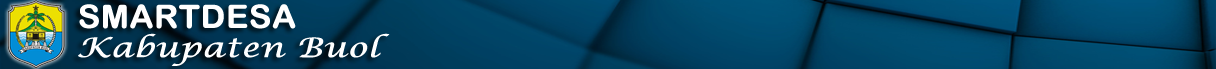
<style>
.page{position:relative;width:1216px;height:69px}
.page>*{position:absolute;margin:0}
.t1{font:32.1px "ArialRoundedMTBold";color:#ffffff;font-weight:bold;scale:1.03 1}
.t2{font:27.1px "LucidaCalligraphy-Italic";color:#ffffff;font-weight:bold;scale:1.22 1}
</style>
<div class="page">
<p class="t1" style="left:79px;top:4px;width:217px;height:25px">SMARTDESA</p>
<p class="t2" style="left:78px;top:33px;width:312px;height:33px">Kabupaten Buol</p>
</div>
